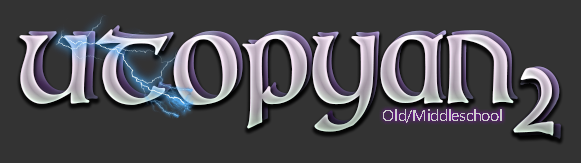
<style>
.page{position:relative;width:581px;height:163px;background:#333333}
.page>*{position:absolute;margin:0}
.t1{font:115.5px "IrishUncialfabeta-Bold"}
.t2{font:112.5px "IrishUncialfabeta-Bold"}
.t3{font:97.9px "IrishUncialfabeta-Bold"}
.t4{font:118.9px "IrishUncialfabeta-Bold"}
.t5{font:15.7px "SegoeUISymbol";color:#cccccc}
</style>
<div class="page">
<p class="t1" style="left:19px;top:29px;width:495px;height:103px">Utopyan</p>
<p class="t1" style="left:28px;top:25px;width:490px;height:103px">utopyan</p>
<p class="t2" style="left:513px;top:67px;width:41px;height:69px">2</p>
<p class="t3" style="left:514px;top:73px;width:36px;height:61px">2</p>
<p class="t4" style="left:518px;top:66px;width:43px;height:73px">2</p>
<p class="t5" style="left:383px;top:109px;width:119px;height:14px">Old/Middleschool</p>
</div>
